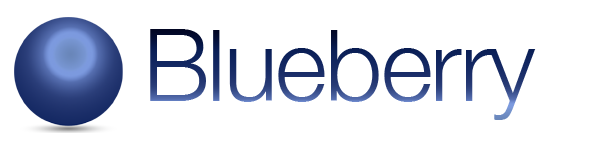
<style>
.page{position:relative;width:600px;height:150px;background:#ffffff}
.page>*{position:absolute;margin:0}
.t1{font:99.9px "HelveticaNeue-Light";letter-spacing:-0.02em;color:#1f2c65}
</style>
<div class="page">
<p class="t1" style="left:150px;top:29px;width:386px;height:91px">Blueberry</p>
</div>
